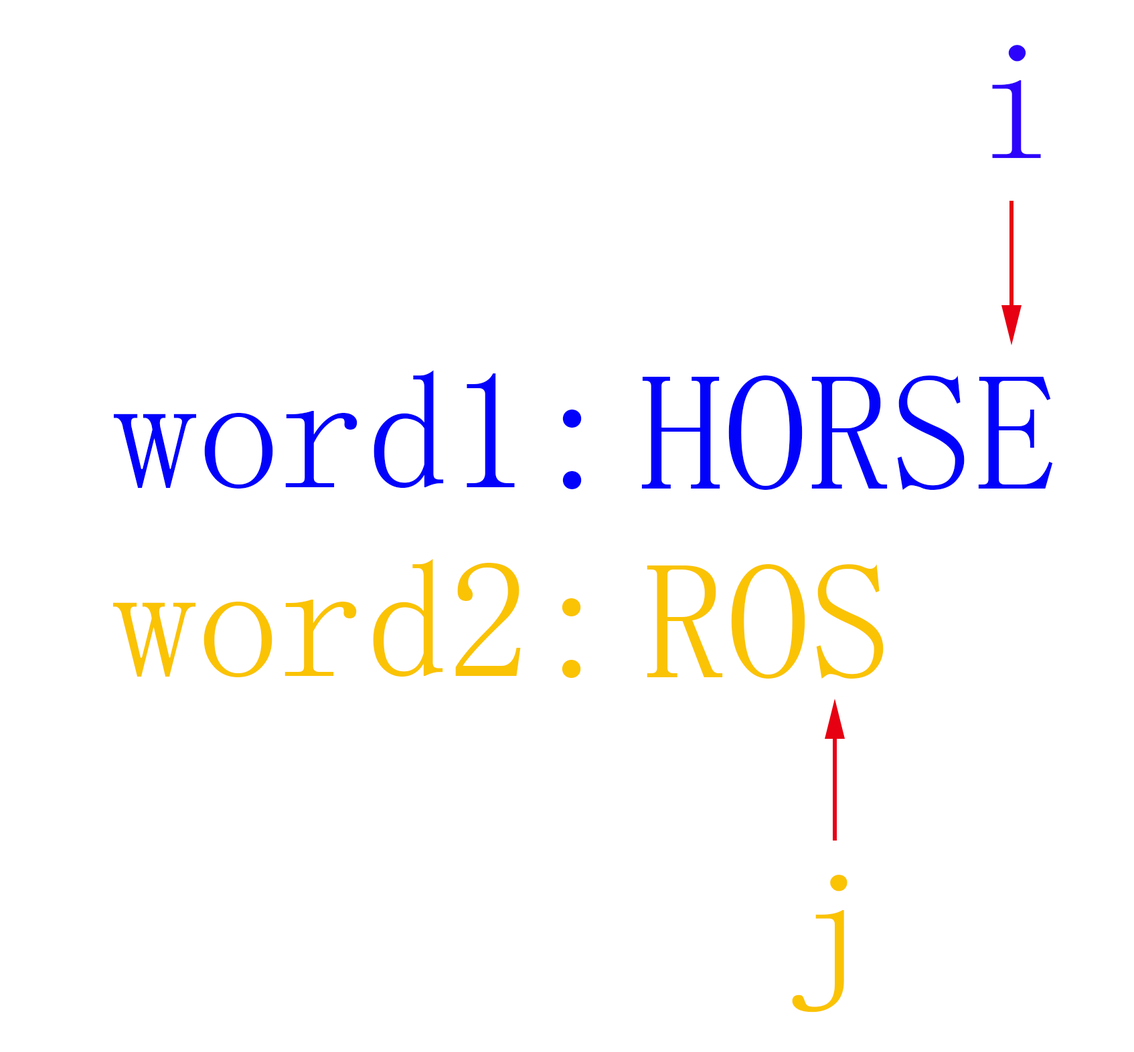
<style>
.page{position:relative;width:1134px;height:1052px;background:#ffffff}
.page>*{position:absolute;margin:0}
.t1{font:167.3px "SimSun";color:#2d04fb}
.t2{font:167.3px "SimSun";color:#0202fb}
.t3{font:167.3px "SimSun";color:#fac304}
</style>
<div class="page">
<p class="t1" style="left:992px;top:45px;width:49px;height:114px">i</p>
<p class="t2" style="left:113px;top:370px;width:469px;height:119px">word1:</p>
<p class="t2" style="left:641px;top:375px;width:412px;height:115px">HORSE</p>
<p class="t3" style="left:112px;top:559px;width:469px;height:119px">word2:</p>
<p class="t3" style="left:646px;top:564px;width:237px;height:115px">ROS</p>
<p class="t3" style="left:792px;top:875px;width:55px;height:137px">j</p>
</div>
